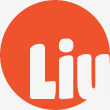
<style>
.page{position:relative;width:110px;height:110px;background:#ee532e}
.page>*{position:absolute;margin:0}
.t1{font:77.7px "TitanOne";color:#f5f5f5;scale:0.68 1}
</style>
<div class="page">
<p class="t1" style="left:30px;top:38px;width:80px;height:62px">Liu</p>
</div>
